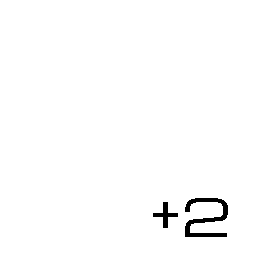
<style>
.page{position:relative;width:256px;height:256px;background:#ffffff}
.page>*{position:absolute;margin:0}
.t1{font:50.9px "Michroma";color:#000000}
</style>
<div class="page">
<p class="t1" style="left:153px;top:198px;width:75px;height:39px">+2</p>
</div>
